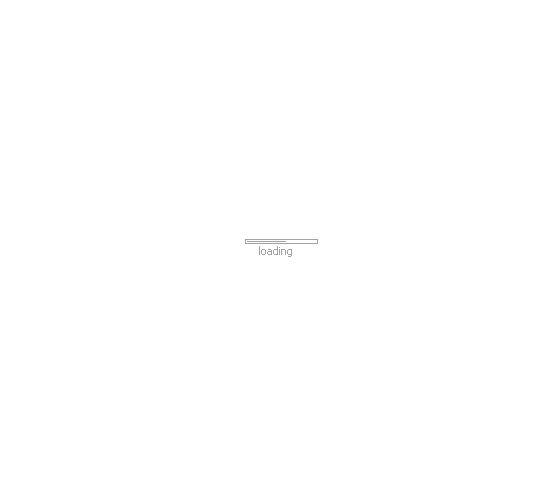
<style>
.page{position:relative;width:559px;height:484px;background:#ffffff}
.page>*{position:absolute;margin:0}
.t1{font:11px "Tahoma";color:#a2a2a2}
</style>
<div class="page">
<p class="t1" style="left:259px;top:246px;width:33px;height:11px">loading</p>
</div>
